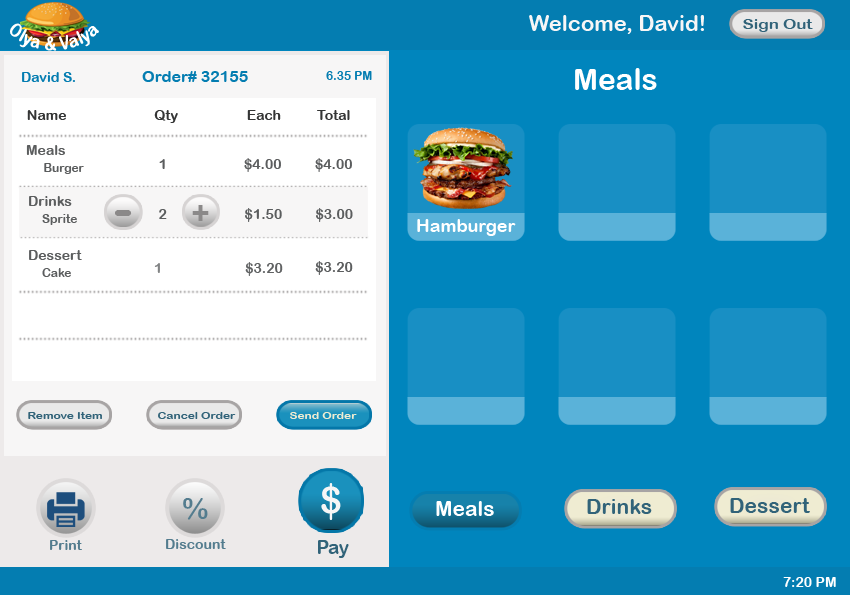
<style>
.page{position:relative;width:850px;height:595px;background:#0085bd}
.page>*{position:absolute;margin:0}
.t1{font:22px "ArialRoundedMTBold";color:#f7f6f6}
.t2{font:14px "ArialRoundedMTBold";color:#ffffff}
.t3{font:14px "ArialRoundedMTBold";color:#316379;scale:1.2 1}
.t4{font:14px "ArialRoundedMTBold";color:#047db1}
.t5{font:16px "ArialRoundedMTBold";color:#047db1}
.t6{font:12px "ArialRoundedMTBold";color:#047db1}
.t7{font:30px "ArialRoundedMTBold";color:#ffffff}
.t8{font:14px "ArialRoundedMTBold";color:#343535}
.t9{font:12px "ArialRoundedMTBold";color:#5b5d5e}
.t10{font:14px "ArialRoundedMTBold";color:#5b5d5e}
.t11{font:31.5px "ArialRoundedMTBold";color:#8b8989}
.t12{font:53.5px "ArialRoundedMTBold";color:#8b8989}
.t13{font:18.1px "ArialRoundedMTBold";color:#ffffff}
.t14{font:14px "ArialRoundedMTBold";color:#818384}
.t15{font:14px "ArialRoundedMTBold";color:#606263}
.t16{font:10px "ArialRoundedMTBold";color:#316379;scale:1.2 1}
.t17{font:10px "ArialRoundedMTBold";color:#efecd2;scale:1.2 1}
.t18{font:37px "ArialRoundedMTBold";color:#f7f6f6}
.t19{font:30px "ArialRoundedMTBold";color:#537c8e}
.t20{font:21px "ArialRoundedMTBold";color:#ffffff}
.t21{font:21px "ArialRoundedMTBold";color:#316379}
.t22{font:14px "ArialRoundedMTBold";color:#537c8e}
.t23{font:18.5px "ArialRoundedMTBold";color:#316379}
</style>
<div class="page">
<p class="t1" style="left:529px;top:15px;width:175px;height:19px">Welcome, David!</p>
<p class="t2" style="left:10px;top:23px;width:89px;height:28px">Olya &amp; Valya</p>
<p class="t3" style="left:743px;top:19px;width:70px;height:13px">Sign Out</p>
<p class="t4" style="left:22px;top:72px;width:53px;height:10px">David S.</p>
<p class="t5" style="left:142px;top:71px;width:106px;height:11px">Order# 32155</p>
<p class="t6" style="left:326px;top:71px;width:46px;height:9px">6.35 PM</p>
<p class="t7" style="left:575px;top:68px;width:82px;height:22px">Meals</p>
<p class="t8" style="left:27px;top:110px;width:39px;height:10px">Name</p>
<p class="t8" style="left:154px;top:110px;width:24px;height:13px">Qty</p>
<p class="t8" style="left:247px;top:110px;width:34px;height:10px">Each</p>
<p class="t8" style="left:317px;top:110px;width:33px;height:10px">Total</p>
<p class="t9" style="left:26px;top:145px;width:58px;height:29px"><span class="t10">Meals<br>     </span>Burger</p>
<p class="t10" style="left:159px;top:159px;width:6px;height:10px">1</p>
<p class="t10" style="left:244px;top:158px;width:37px;height:14px">$4.00</p>
<p class="t10" style="left:315px;top:158px;width:37px;height:14px">$4.00</p>
<p class="t10" style="left:29px;top:196px;width:48px;height:29px">Drinks<br>    <span class="t9">Sprite</span></p>
<p class="t10" style="left:159px;top:209px;width:8px;height:10px">2</p>
<p class="t11" style="left:192px;top:205px;width:17px;height:16px">+</p>
<p class="t10" style="left:245px;top:208px;width:37px;height:14px">$1.50</p>
<p class="t10" style="left:316px;top:208px;width:37px;height:14px">$3.00</p>
<p class="t12" style="left:115px;top:210px;width:17px;height:6px">-</p>
<p class="t13" style="left:417px;top:219px;width:99px;height:17px">Hamburger</p>
<p class="t10" style="left:29px;top:250px;width:53px;height:27px">Dessert<br>    <span class="t9">Cake</span></p>
<p class="t14" style="left:154px;top:263px;width:6px;height:10px">1</p>
<p class="t15" style="left:245px;top:262px;width:38px;height:14px">$3.20</p>
<p class="t10" style="left:315px;top:261px;width:38px;height:14px">$3.20</p>
<p class="t16" style="left:28px;top:412px;width:74px;height:7px">Remove Item</p>
<p class="t16" style="left:158px;top:412px;width:78px;height:7px">Cancel Order</p>
<p class="t17" style="left:290px;top:412px;width:67px;height:7px">Send Order</p>
<p class="t18" style="left:321px;top:483px;width:20px;height:37px">$</p>
<p class="t19" style="left:183px;top:498px;width:25px;height:22px">%</p>
<p class="t20" style="left:436px;top:501px;width:58px;height:15px">Meals</p>
<p class="t21" style="left:587px;top:499px;width:65px;height:15px">Drinks</p>
<p class="t21" style="left:730px;top:498px;width:80px;height:15px">Dessert</p>
<p class="t22" style="left:50px;top:540px;width:32px;height:10px">Print</p>
<p class="t22" style="left:166px;top:539px;width:60px;height:10px">Discount</p>
<p class="t23" style="left:318px;top:540px;width:31px;height:18px">Pay</p>
<p class="t2" style="left:783px;top:577px;width:53px;height:10px">7:20 PM</p>
</div>
